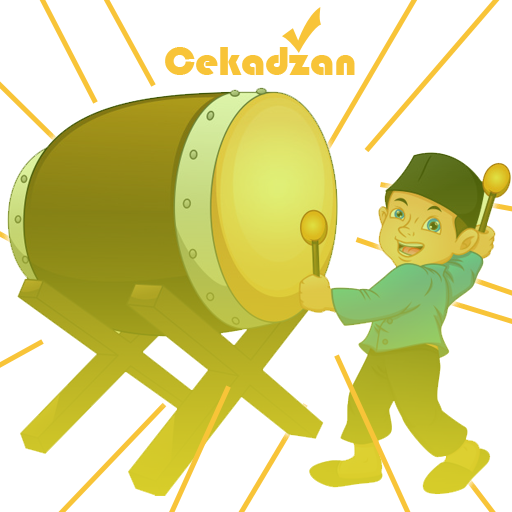
<style>
.page{position:relative;width:512px;height:512px;background:#ffffff}
.page>*{position:absolute;margin:0}
.t1{font:41.5px "Bauhaus93";color:#f8c438}
</style>
<div class="page">
<p class="t1" style="left:165px;top:47px;width:190px;height:29px">Cekadzan</p>
</div>
